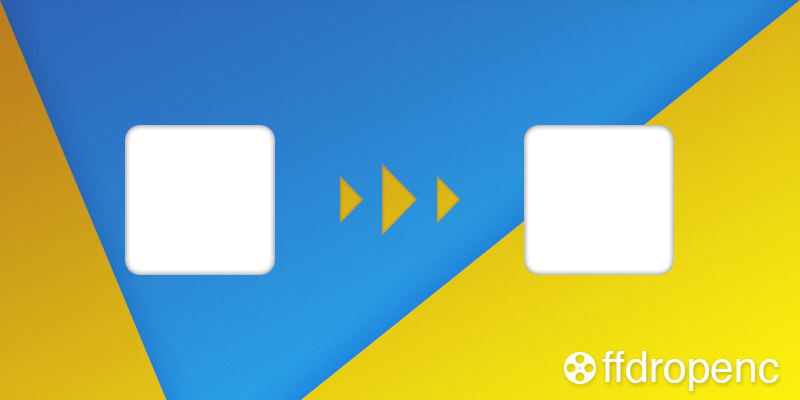
<style>
.page{position:relative;width:800px;height:400px}
.page>*{position:absolute;margin:0}
.t1{font:42.5px "Helvetica";color:#ffffff}
</style>
<div class="page">
<p class="t1" style="left:602px;top:351px;width:177px;height:40px">ffdropenc</p>
</div>
